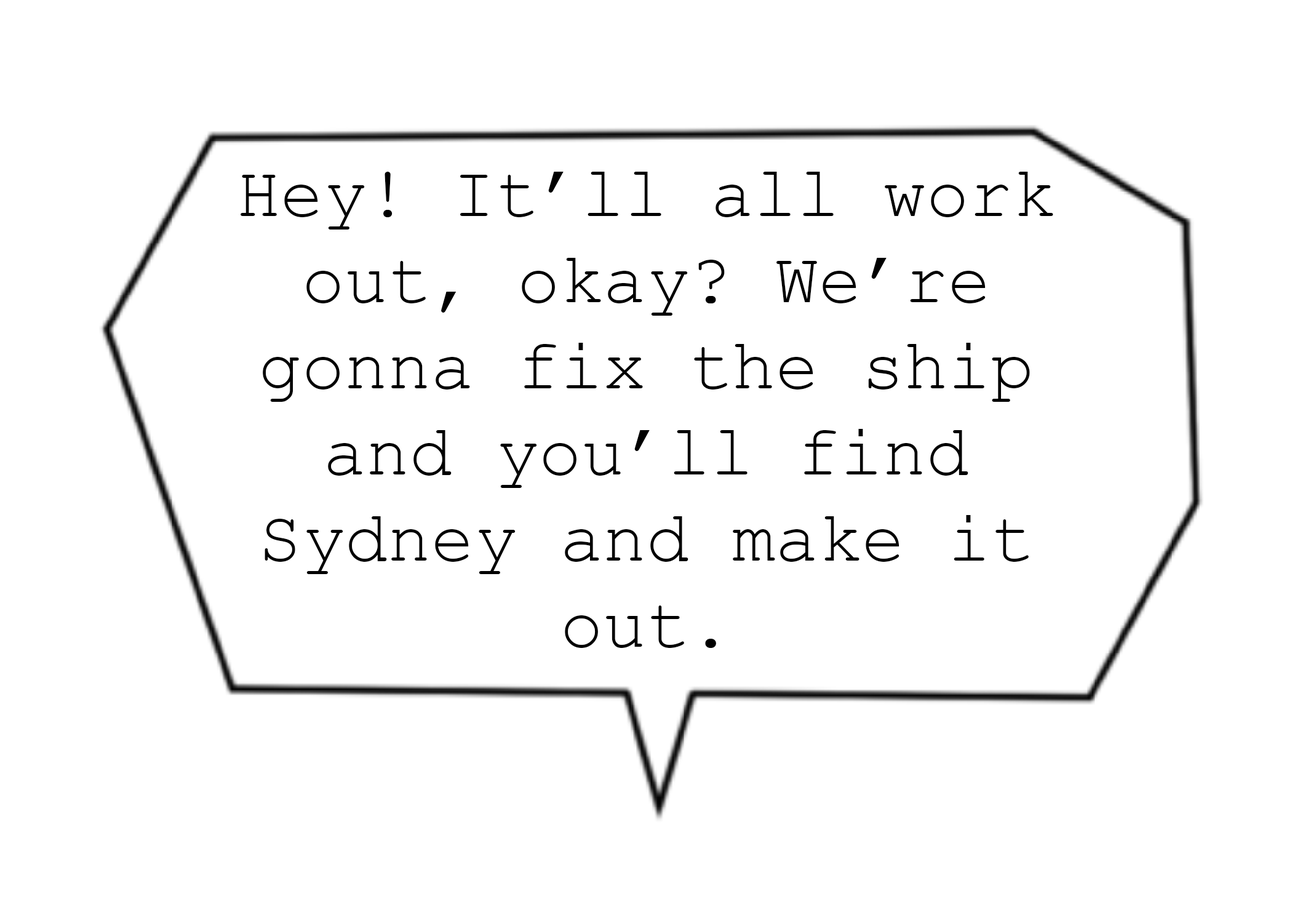
<style>
.page{position:relative;width:1292px;height:923px;background:#ffffff}
.page>*{position:absolute;margin:0}
.t1{font:71.8px "CourierNewPSMT";color:#000000}
</style>
<div class="page">
<p class="t1" style="left:241px;top:172px;width:812px;height:476px;text-align:center">Hey! It’ll all work out, okay? We’re gonna fix the ship and you’ll find Sydney and make it out.</p>
</div>
